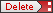
<style>
.page{position:relative;width:53px;height:13px}
.page>*{position:absolute;margin:0}
.t1{font:8.6px "Tahoma";letter-spacing:0.025em;color:#cd0000;scale:1.16 1}
</style>
<div class="page">
<p class="t1" style="left:6px;top:2px;width:27px;height:8px">Delete</p>
</div>
